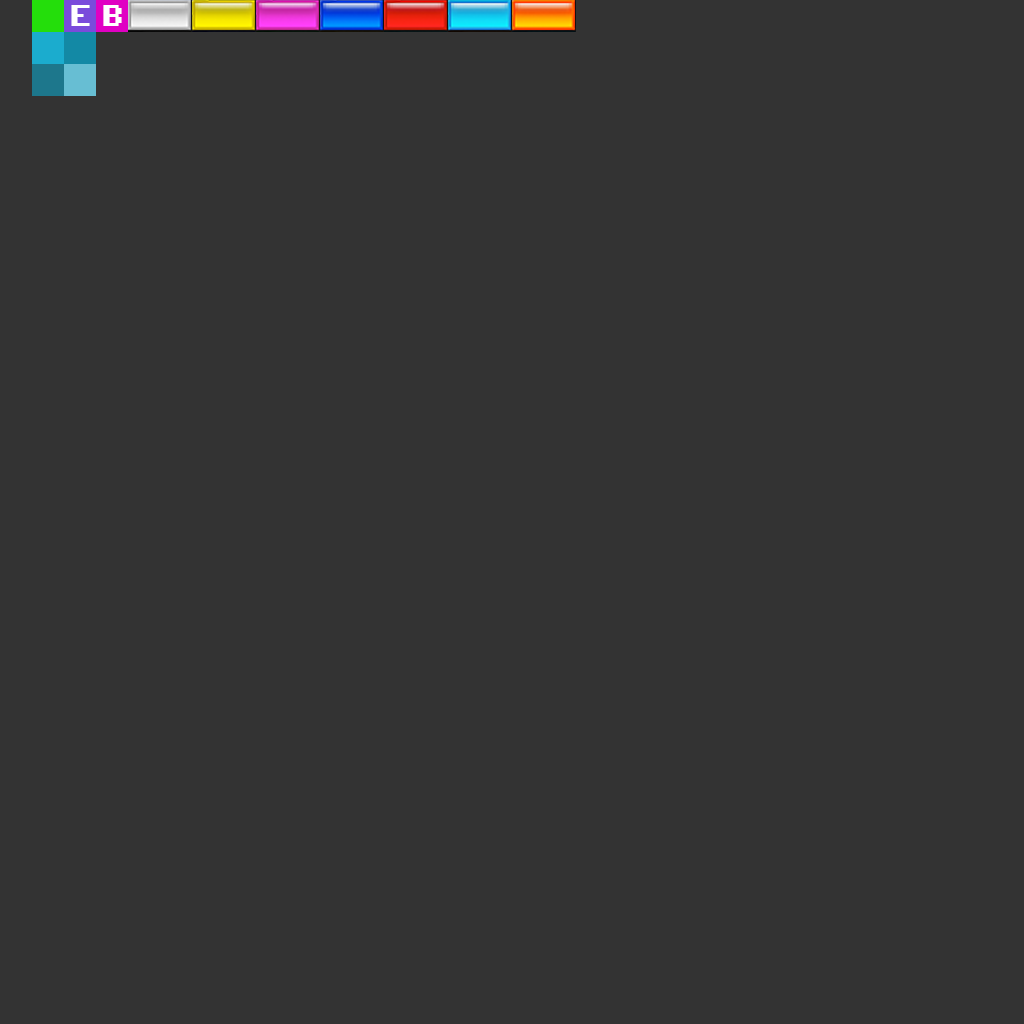
<style>
.page{position:relative;width:1024px;height:1024px;background:#333333}
.page>*{position:absolute;margin:0}
.t1{font:24px "C64Pro";color:#ffffff}
</style>
<div class="page">
<p class="t1" style="left:71px;top:5px;width:19px;height:21px">E</p>
<p class="t1" style="left:103px;top:5px;width:19px;height:21px">B</p>
</div>
